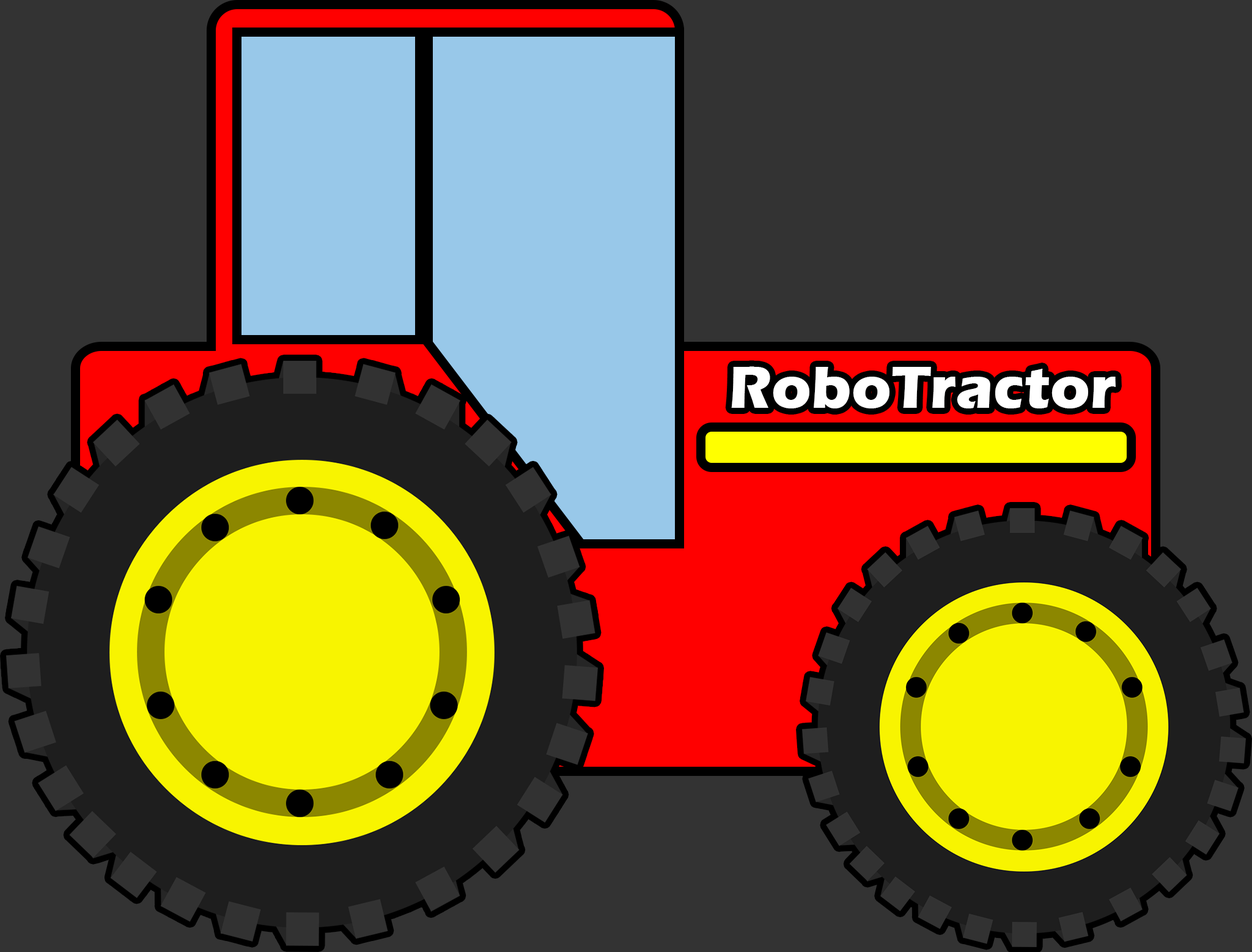
<style>
.page{position:relative;width:1252px;height:952px;background:#333333}
.page>*{position:absolute;margin:0}
.t1{font:61.2px "ErasITC-Bold";color:#ffffff}
</style>
<div class="page">
<p class="t1" style="left:731px;top:366px;width:385px;height:42px">RoboTractor</p>
</div>
